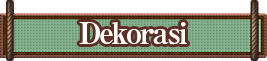
<style>
.page{position:relative;width:267px;height:61px;background:#ffffff}
.page>*{position:absolute;margin:0}
.t1{font:30px "RyuminPro-ExBold";letter-spacing:-0.08em;color:#fffff7}
</style>
<div class="page">
<p class="t1" style="left:79px;top:22px;width:108px;height:23px">Dekorasi</p>
</div>
